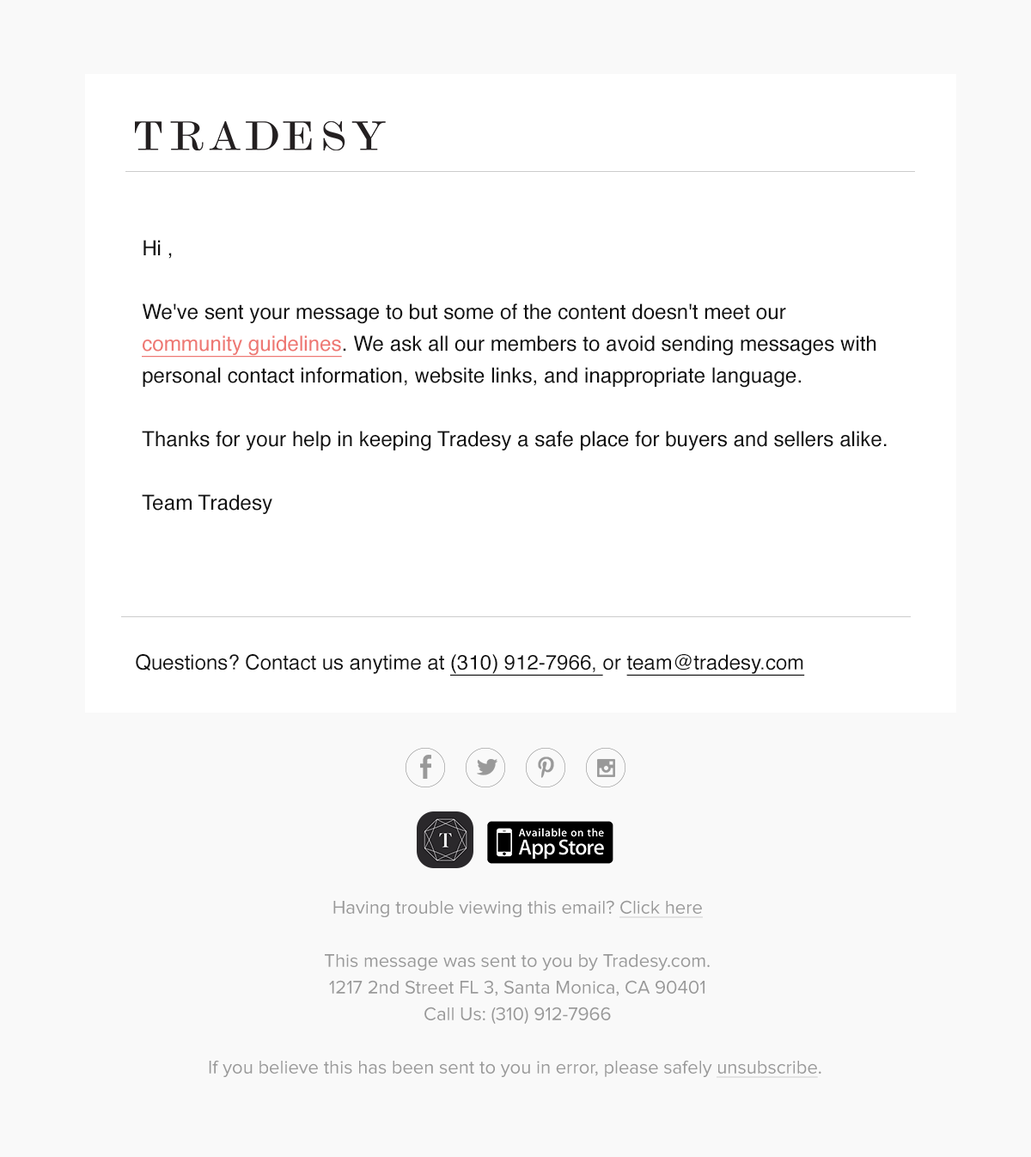
<style>
.page{position:relative;width:1031px;height:1157px;background:#f9f9f9}
.page>*{position:absolute;margin:0}
.t1{font:20.8px/31.8px "Helvetica";color:#111111}
.t2{font:20.8px/31.8px "Helvetica";color:#ee7873;text-decoration:underline}
.t3{font:20.6px "Helvetica";color:#111111}
.t4{font:20.6px "Helvetica";color:#111111;text-decoration:underline}
.t5{font:18.9px/26.6px "ProximaNova-Regular";color:#999999}
.t6{font:18.9px/26.6px "ProximaNova-Regular";color:#999999;text-decoration:underline}
</style>
<div class="page">
<p class="t1" style="left:142px;top:240px;width:745px;height:274px">Hi ,<br><br>We've sent your message to but some of the content doesn't meet our <span class="t2">community guidelines</span>. We ask all our members to avoid sending messages with personal contact information, website links, and inappropriate language.<br><br>Thanks for your help in keeping Tradesy a safe place for buyers and sellers alike.<br><br>Team Tradesy</p>
<p class="t3" style="left:136px;top:654px;width:669px;height:21px">Questions? Contact us anytime at <span class="t4">(310) 912-7966, </span>or <span class="t4">team@tradesy.com</span></p>
<p class="t5" style="left:209px;top:900px;width:612px;height:177px;text-align:center">Having trouble viewing this email? <span class="t6">Click here<br></span><br>This message was sent to you by Tradesy.com.<br>1217 2nd Street FL 3, Santa Monica, CA 90401<br>Call Us: (310) 912-7966<br><br>If you believe this has been sent to you in error, please safely <span class="t6">unsubscribe</span>.</p>
</div>
